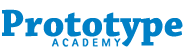
<style>
.page{position:relative;width:189px;height:50px;background:#ffffff}
.page>*{position:absolute;margin:0}
.t1{font:40px "ChaparralPro-Bold";color:#0080c6}
</style>
<div class="page">
<p class="t1" style="left:2px;top:9px;width:181px;height:38px">Prototype</p>
</div>
